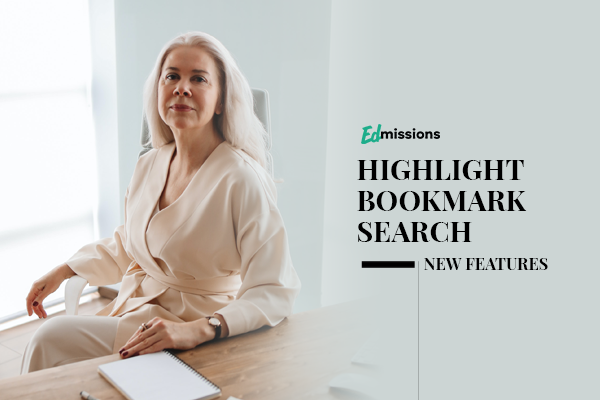
<style>
.page{position:relative;width:600px;height:400px;background:#ccd5d4}
.page>*{position:absolute;margin:0}
.t1{font:28.5px/31.1px "PlayfairDisplay-Bold";color:#000000;text-transform:uppercase}
.t2{font:16.3px "PlayfairDisplay-Bold";color:#000000;text-transform:uppercase}
</style>
<div class="page">
<p class="t1" style="left:357px;top:160px;width:170px;height:82px">Highlight<br>Bookmark<br>Search</p>
<p class="t2" style="left:424px;top:258px;width:124px;height:12px">New Features</p>
</div>
